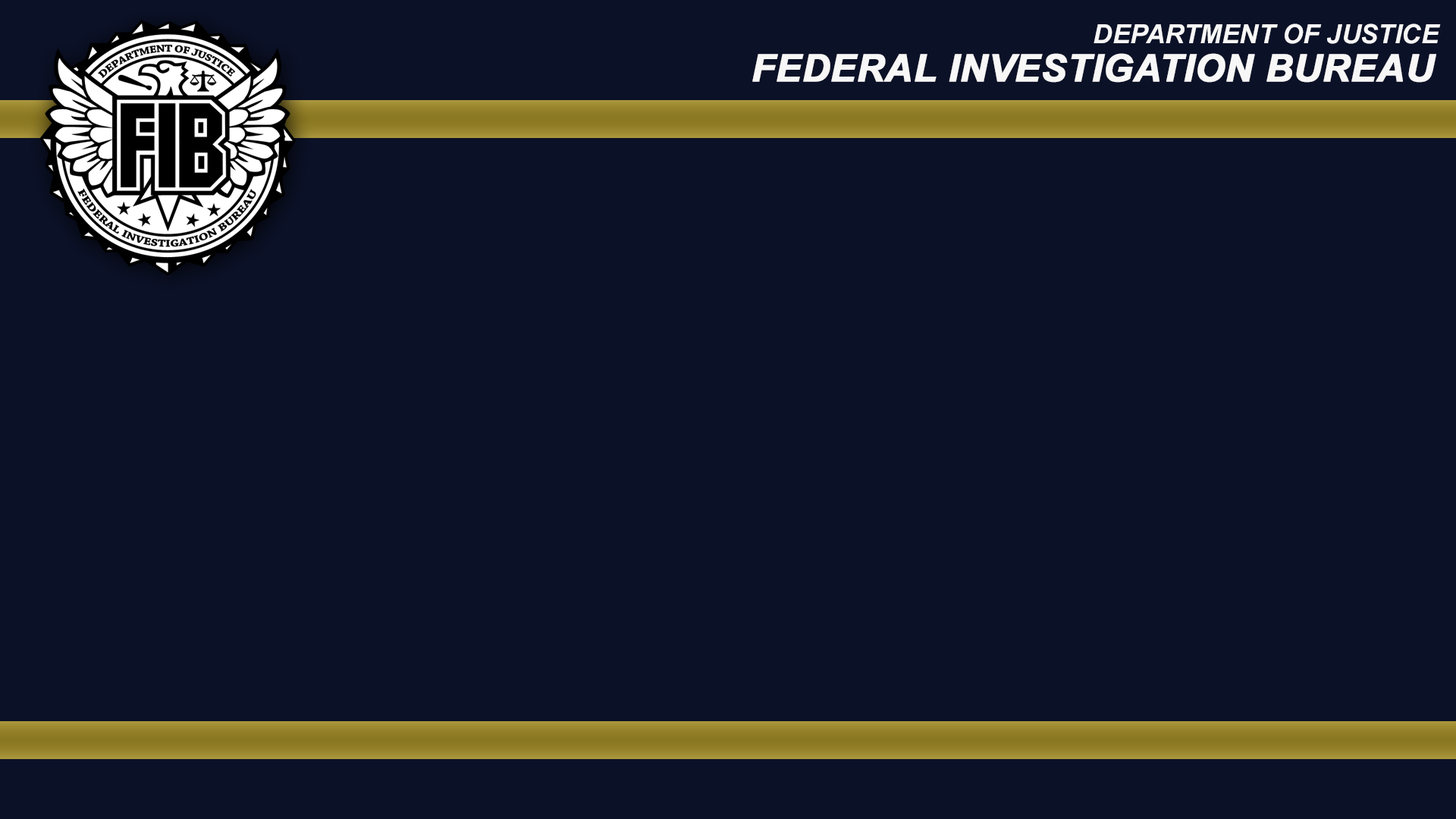
<style>
.page{position:relative;width:1456px;height:819px;background:#0b1127}
.page>*{position:absolute;margin:0}
.t1{font:26.5px "Arial-BoldItalicMT";color:#ffffff}
.t2{font:37.9px "Arial-BoldItalicMT";color:#ffffff;font-weight:bold}
</style>
<div class="page">
<p class="t1" style="left:1094px;top:24px;width:347px;height:20px">DEPARTMENT OF JUSTICE</p>
<p class="t2" style="left:752px;top:53px;width:684px;height:30px">FEDERAL INVESTIGATION BUREAU</p>
</div>
